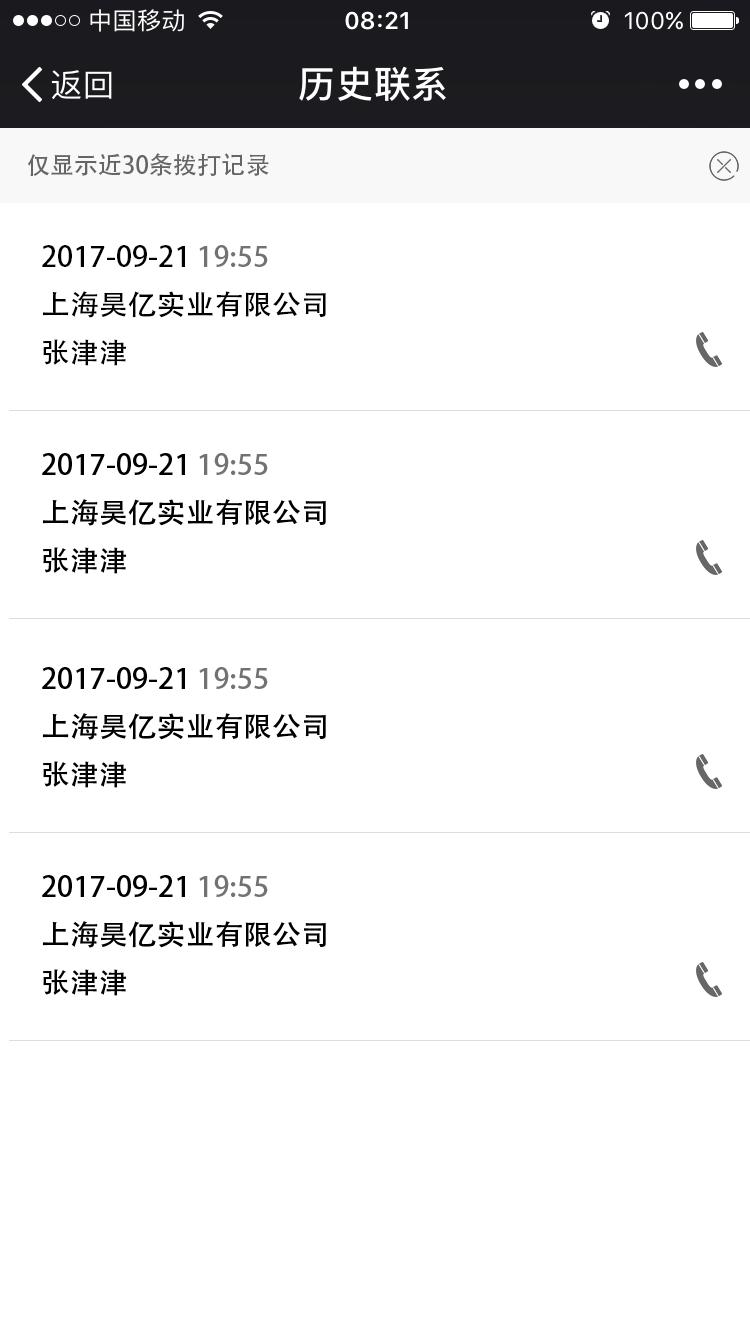
<style>
.page{position:relative;width:750px;height:1334px;background:#ffffff}
.page>*{position:absolute;margin:0}
.t1{font:24px "AdobeHeitiStd-Regular";color:#656565}
.t2{font:28px/48px "AdobeHeitiStd-Regular";color:#000000;scale:1.03 1}
.t3{font:28px/48px "AdobeHeitiStd-Regular";color:#727272;scale:1.03 1}
</style>
<div class="page">
<p class="t1" style="left:27px;top:153px;width:242px;height:23px">仅显示近30条拨打记录</p>
<p class="t2" style="left:42px;top:245px;width:284px;height:121px">2017-09-21 <span class="t3">19:55<br></span>上海昊亿实业有限公司<br>张津津</p>
</div>
